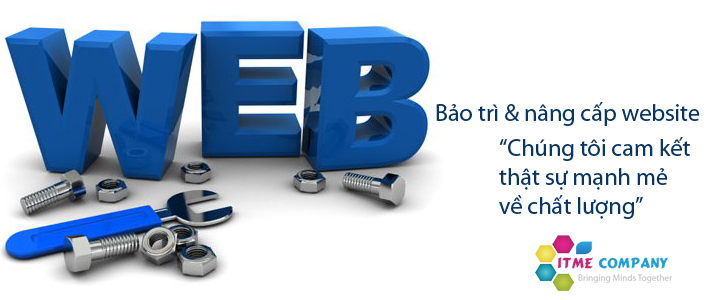
<style>
.page{position:relative;width:710px;height:300px;background:#ffffff}
.page>*{position:absolute;margin:0}
.t1{font:24px "MyriadPro-Regular";color:#093563}
</style>
<div class="page">
<p class="t1" style="left:436px;top:102px;width:264px;height:24px">Bảo trì &amp; nâng cấp website</p>
<p class="t1" style="left:499px;top:137px;width:191px;height:82px">“Chúng tôi cam kết <br>thật sự mạnh mẻ <br>về chất lượng”</p>
</div>
